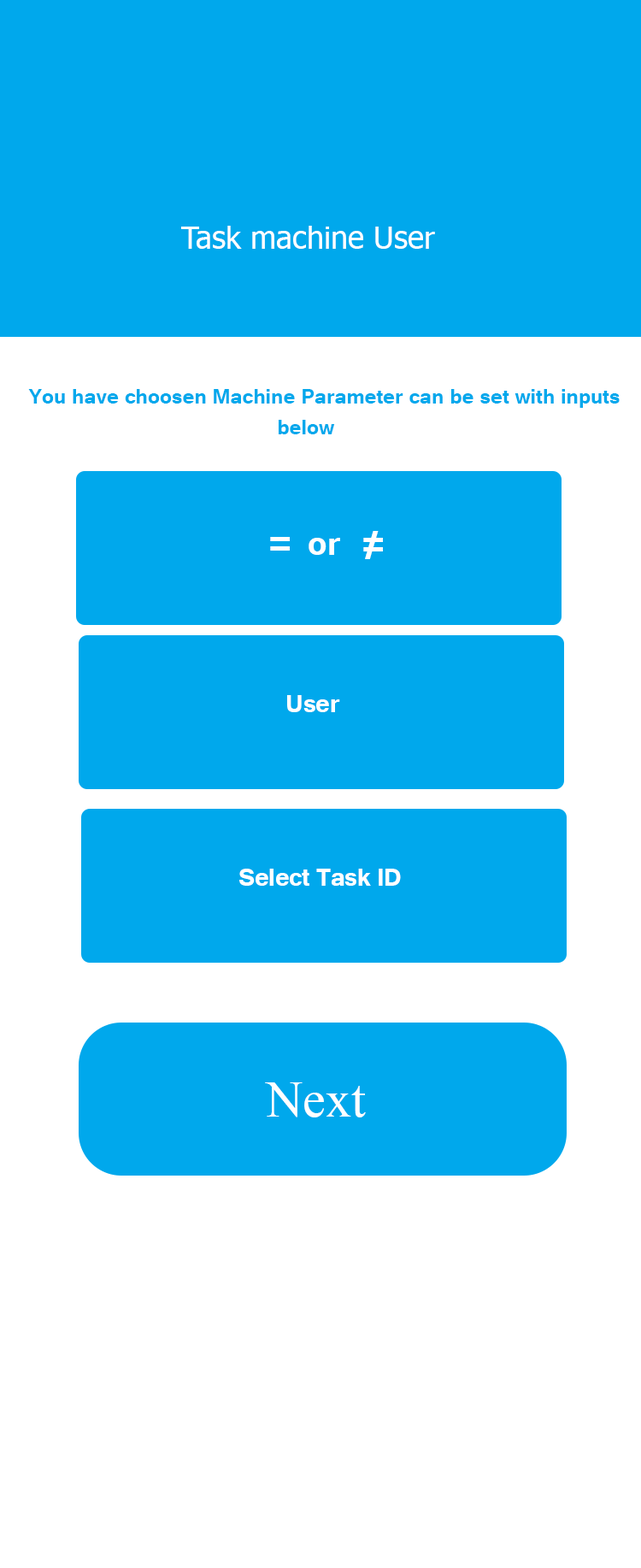
<style>
.page{position:relative;width:641px;height:1568px;background:#00a8ec}
.page>*{position:absolute;margin:0}
.t1{font:30.8px "Tahoma";color:#ffffff}
.t2{font:25.6px "Tunga-Bold";color:#00a8ec}
.t3{font:51.3px "Tunga-Bold";color:#ffffff}
.t4{font:41px "Tunga-Bold";color:#ffffff}
.t5{font:30.8px "Tunga-Bold";color:#ffffff}
.t6{font:30.8px "Tunga-Bold";letter-spacing:-0.01em;color:#ffffff}
.t7{font:51.3px "TimesNewRomanPSMT";color:#ffffff}
</style>
<div class="page">
<p class="t1" style="left:181px;top:226px;width:254px;height:23px">Task machine User</p>
<p class="t2" style="left:28px;top:389px;width:592px;height:45px">You have choosen Machine Parameter can be set with inputs <br>                                          below</p>
<p class="t3" style="left:365px;top:531px;width:14px;height:28px">/</p>
<p class="t3" style="left:270px;top:537px;width:20px;height:14px">=</p>
<p class="t4" style="left:309px;top:538px;width:31px;height:17px">or</p>
<p class="t3" style="left:363px;top:538px;width:20px;height:13px">=</p>
<p class="t5" style="left:287px;top:695px;width:53px;height:17px">User</p>
<p class="t6" style="left:239px;top:869px;width:162px;height:17px">Select Task ID</p>
<p class="t7" style="left:265px;top:1082px;width:101px;height:35px">Next</p>
</div>
